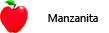
<style>
.page{position:relative;width:109px;height:33px;background:#ffffff}
.page>*{position:absolute;margin:0}
.t1{font:11px "SegoeUI";color:#000000}
</style>
<div class="page">
<p class="t1" style="left:48px;top:14px;width:50px;height:8px">Manzanita</p>
</div>
